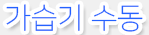
<style>
.page{position:relative;width:149px;height:35px;background:#ffffff}
.page>*{position:absolute;margin:0}
.t1{font:29px "NanumSquareL";color:#2462ff}
</style>
<div class="page">
<p class="t1" style="left:6px;top:4px;width:137px;height:28px">가습기 수동</p>
</div>
